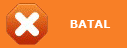
<style>
.page{position:relative;width:127px;height:48px;background:#f87f26}
.page>*{position:absolute;margin:0}
.t1{font:11px "Verdana-Bold";letter-spacing:0.01em;color:#ffffff}
</style>
<div class="page">
<p class="t1" style="left:70px;top:20px;width:41px;height:8px">BATAL</p>
</div>
